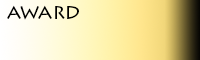
<style>
.page{position:relative;width:200px;height:60px}
.page>*{position:absolute;margin:0}
.t1{font:18px "LithosPro-Regular";color:#000000}
</style>
<div class="page">
<p class="t1" style="left:7px;top:5px;width:72px;height:15px">AWARD</p>
</div>
